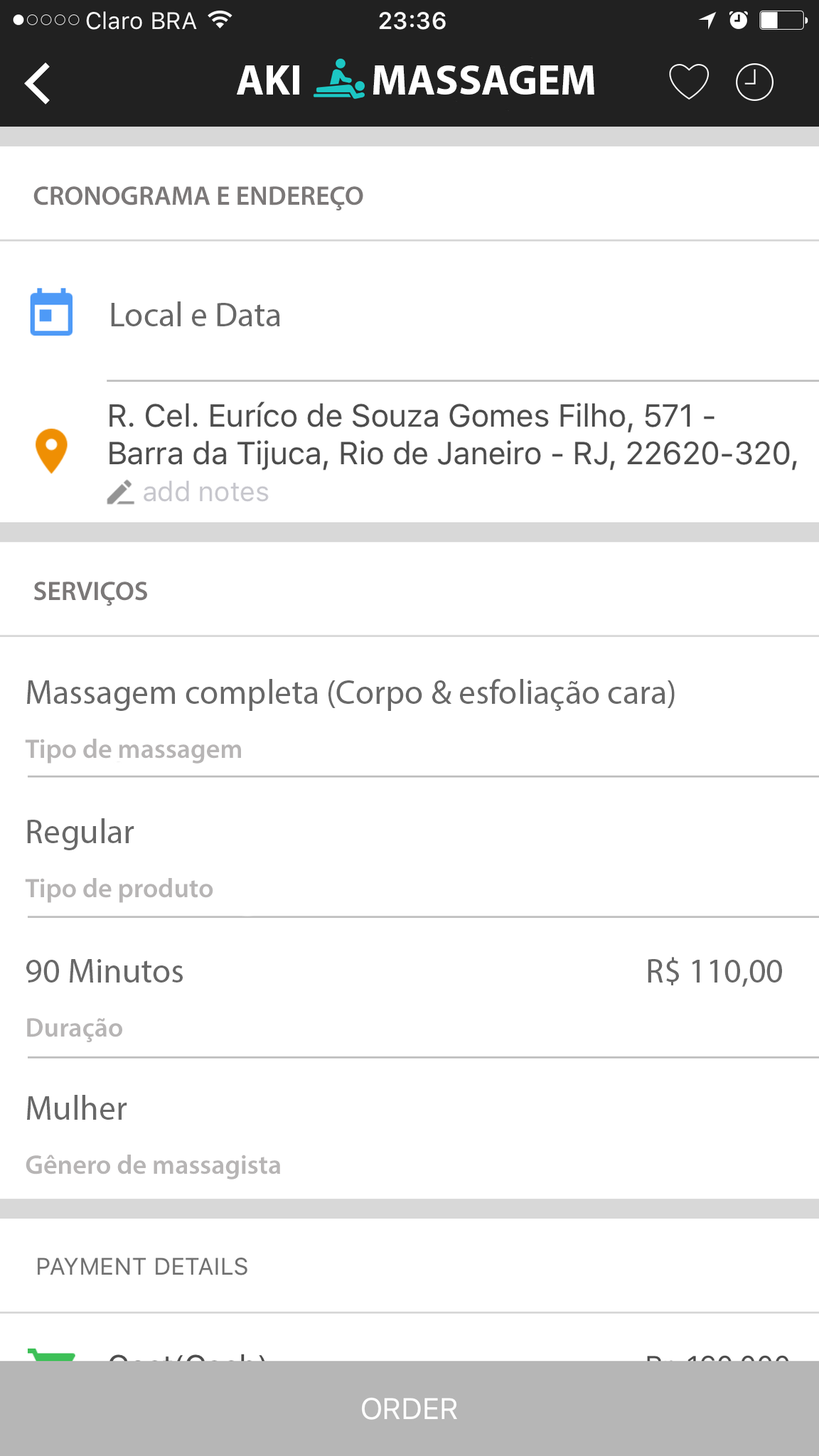
<style>
.page{position:relative;width:819px;height:1456px;background:#ffffff}
.page>*{position:absolute;margin:0}
.t1{font:42.7px "MyriadPro-Bold";color:#ffffff}
.t2{font:27px "MyriadPro-Semibold";color:#7b7878}
.t3{font:34.1px "MyriadPro-Regular";color:#686868}
.t4{font:34.1px "MyriadPro-Regular";color:#7b7878}
.t5{font:27px "MyriadPro-Semibold";color:#b7b5b5}
</style>
<div class="page">
<p class="t1" style="left:237px;top:65px;width:357px;height:30px">AKI        MASSAGEM</p>
<p class="t2" style="left:33px;top:186px;width:330px;height:24px">CRONOGRAMA E ENDEREÇO</p>
<p class="t3" style="left:111px;top:301px;width:169px;height:25px">Local e Data</p>
<p class="t2" style="left:34px;top:582px;width:113px;height:24px">SERVIÇOS</p>
<p class="t3" style="left:27px;top:679px;width:648px;height:32px">Massagem completa (Corpo &amp; esfoliação cara)<br><span class="t4">v</span></p>
<p class="t5" style="left:25px;top:739px;width:216px;height:25px">Tipo de massagem</p>
<p class="t3" style="left:27px;top:818px;width:107px;height:32px">Regular</p>
<p class="t5" style="left:25px;top:878px;width:188px;height:25px">Tipo de produto</p>
<p class="t3" style="left:26px;top:959px;width:157px;height:24px">90 Minutos</p>
<p class="t3" style="left:648px;top:957px;width:134px;height:30px">R$ 110,00</p>
<p class="t5" style="left:27px;top:1018px;width:95px;height:24px">Duração</p>
<p class="t3" style="left:27px;top:1095px;width:100px;height:25px">Mulher</p>
<p class="t5" style="left:26px;top:1155px;width:254px;height:24px">Gênero de massagista</p>
</div>
